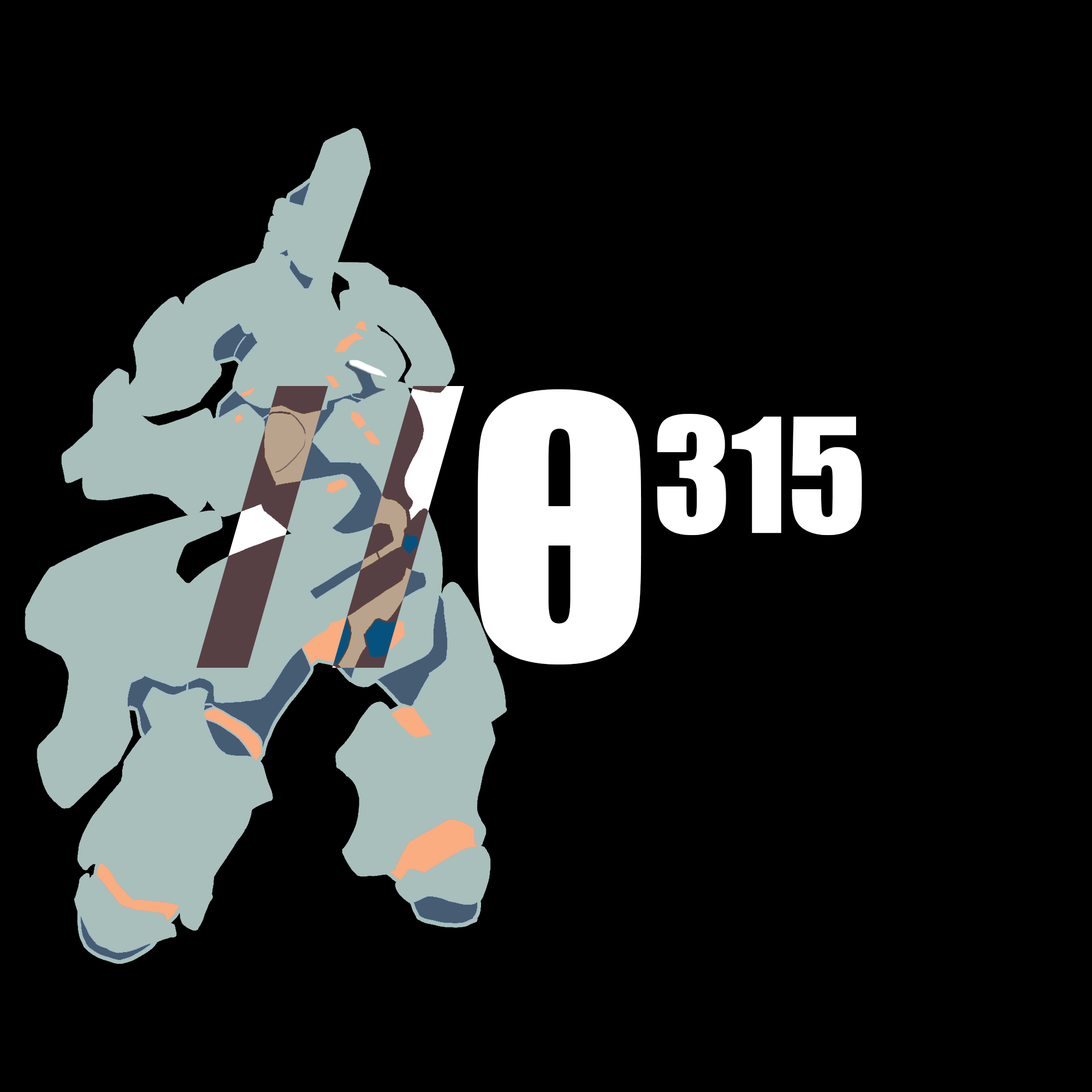
<style>
.page{position:relative;width:1092px;height:1092px;background:#000000}
.page>*{position:absolute;margin:0}
.t1{font:342.9px "Impact";color:#ffffff}
.t2{font:147.4px "Impact";color:#ffffff}
</style>
<div class="page">
<p class="t1" style="left:196px;top:386px;width:666px;height:282px">//Θ<span class="t2">315</span></p>
</div>
